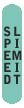
<style>
.page{position:relative;width:24px;height:108px;background:#7fc5b8}
.page>*{position:absolute;margin:0}
.t1{font:12.5px/12px "BellGothicStd-Black";letter-spacing:-0.025em;color:#292929}
</style>
<div class="page">
<p class="t1" style="left:3px;top:26px;width:19px;height:58px">S L<br>P I<br>EM<br>E I<br>D T</p>
</div>
